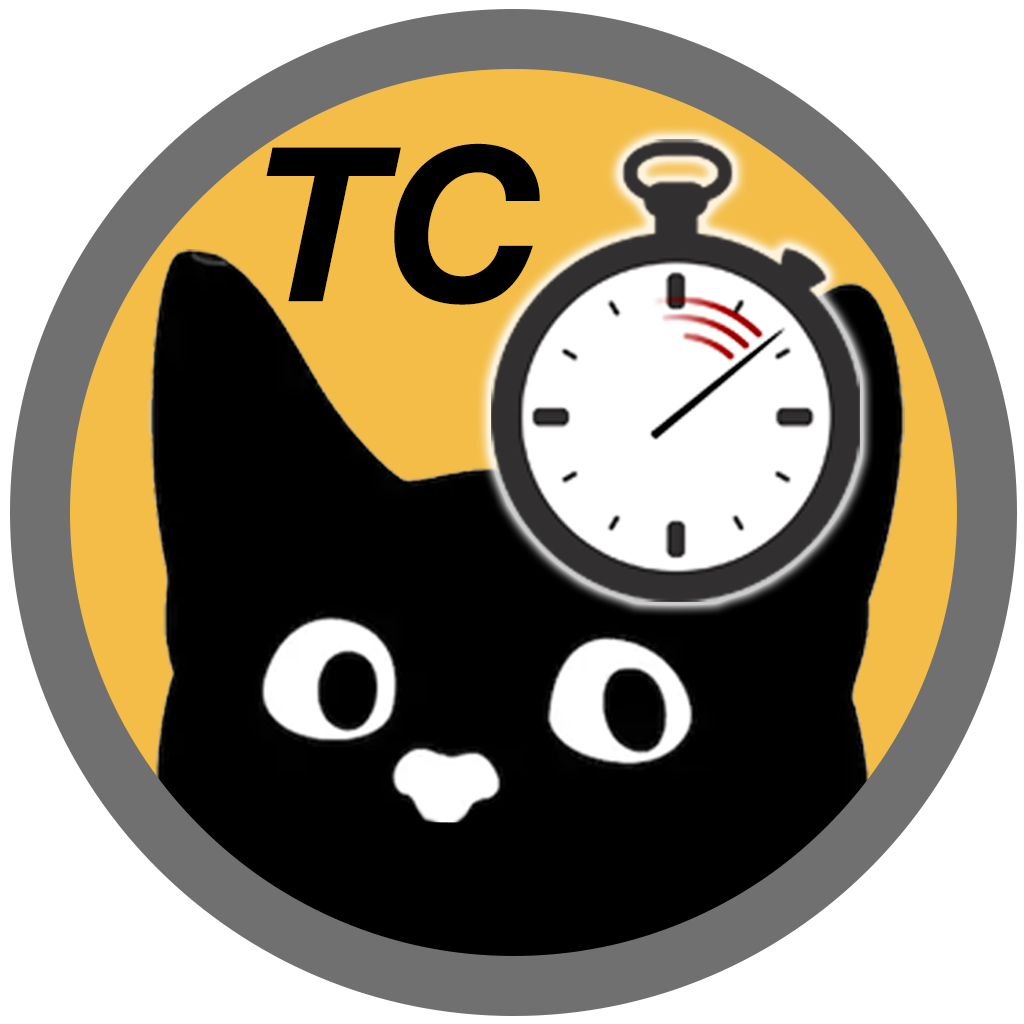
<style>
.page{position:relative;width:1024px;height:1024px;background:#ffffff}
.page>*{position:absolute;margin:0}
.t1{font:215px "HelveticaNeue-BoldItalic";color:#000000}
</style>
<div class="page">
<p class="t1" style="left:266px;top:143px;width:274px;height:162px">TC</p>
</div>
